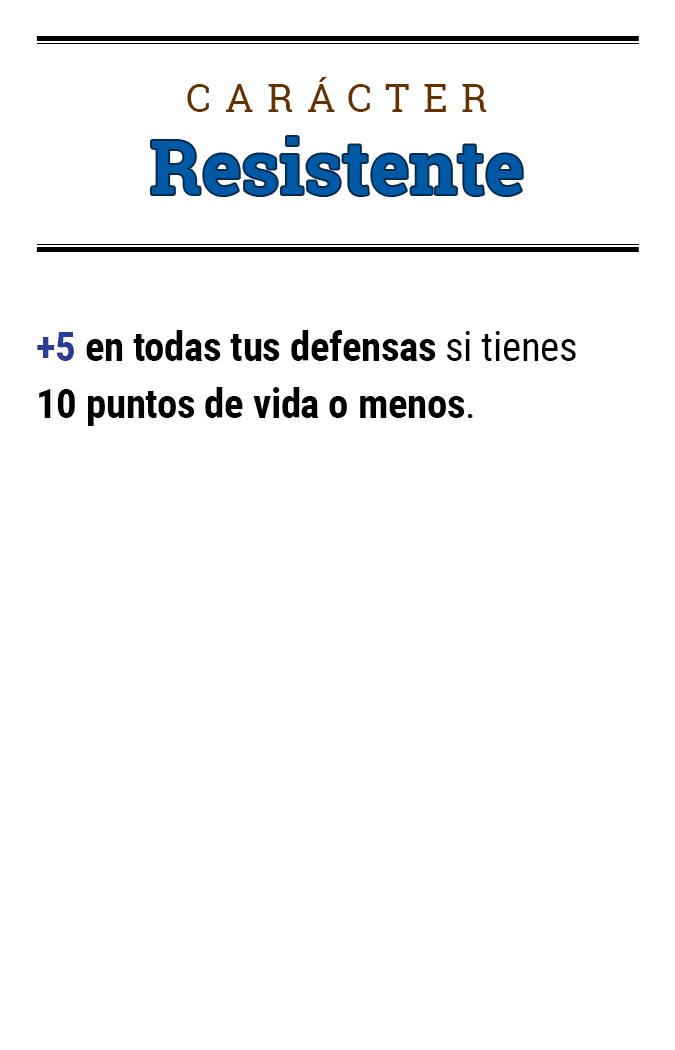
<style>
.page{position:relative;width:675px;height:1050px;background:#ffffff}
.page>*{position:absolute;margin:0}
.t1{font:39.2px "RobotoSlab-Regular";letter-spacing:0.34em;color:#663300}
.t2{font:74.5px "RobotoSlab-Bold";color:#0059a4}
.t3{font:41.1px/57.1px "RobotoCondensed-Bold";letter-spacing:-0.01em;color:#000000}
.t4{font:41.1px/57.1px "RobotoCondensed-Bold";letter-spacing:-0.01em;color:#2a3d93}
.t5{font:41.1px/57.1px "RobotoCondensed-Regular";letter-spacing:-0.01em;color:#000000}
</style>
<div class="page">
<p class="t1" style="left:187px;top:77px;width:300px;height:35px">CARÁCTER</p>
<p class="t2" style="left:152px;top:137px;width:370px;height:58px">Resistente</p>
<p class="t3" style="left:37px;top:330px;width:539px;height:96px"><span class="t4">+5</span> en todas tus defensas <span class="t5">si tienes<br></span>10 puntos de vida o menos<span class="t5">.</span></p>
</div>
